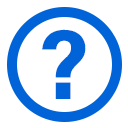
<style>
.page{position:relative;width:128px;height:128px;background:#ffffff}
.page>*{position:absolute;margin:0}
.t1{font:98.9px "AcuminConcept-Bold";color:#0063d7}
</style>
<div class="page">
<p class="t1" style="left:42px;top:29px;width:44px;height:70px">?</p>
</div>
